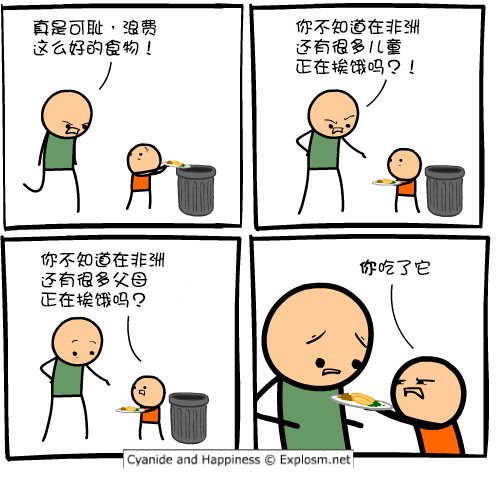
<style>
.page{position:relative;width:500px;height:480px;background:#ffffff}
.page>*{position:absolute;margin:0}
.t1{font:18px/20px "DFGirl";color:#000000}
.t2{font:18px "DFGirl";color:#000000}
.t3{font:18px "DFGirl";color:#000000;font-weight:bold}
</style>
<div class="page">
<p class="t1" style="left:33px;top:19px;width:124px;height:37px">真是可耻，浪费<br>这么好的食物！</p>
<p class="t1" style="left:295px;top:18px;width:125px;height:57px">你不知道在非洲<br>还有很多儿童<br>正在挨饿吗？！</p>
<p class="t1" style="left:40px;top:251px;width:125px;height:57px">你不知道在非洲<br>还有很多父母<br>正在挨饿吗？</p>
<p class="t2" style="left:359px;top:259px;width:72px;height:17px"><span class="t3">你</span>吃了它</p>
</div>
